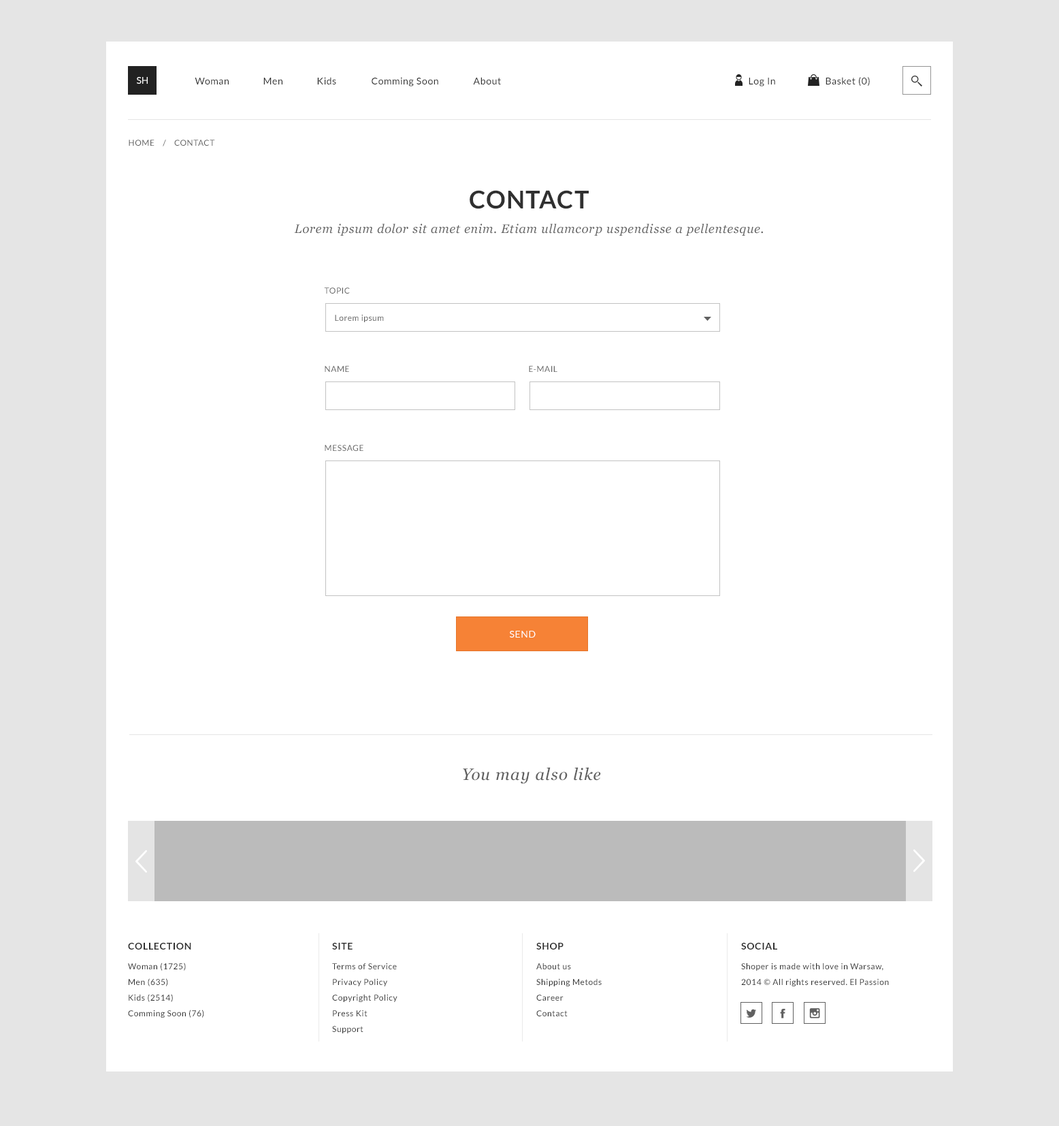
<style>
.page{position:relative;width:1059px;height:1126px;background:#ffffff}
.page>*{position:absolute;margin:0}
.t1{font:9.5px "Lato-Regular";color:#ffffff;text-transform:uppercase}
.t2{font:9.5px "Lato-Regular";letter-spacing:0.05em;color:#303030}
.t3{font:8.2px "Lato-Regular";letter-spacing:0.05em;color:#606060;text-transform:uppercase}
.t4{font:12.3px/24.5px "Georgia-Italic";letter-spacing:0.05em;color:#606060}
.t5{font:24.5px/24.5px "Lato-Bold";letter-spacing:0.05em;color:#303030;text-transform:uppercase}
.t6{font:8.2px "Lato-Regular";letter-spacing:0.05em;color:#606060}
.t7{font:9.5px "Lato-Regular";letter-spacing:0.05em;color:#ffffff;text-transform:uppercase}
.t8{font:16.3px "Georgia-Italic";letter-spacing:0.05em;color:#606060}
.t9{font:9.5px "Lato-Bold";letter-spacing:0.05em;color:#303030;text-transform:uppercase}
.t10{font:8.2px/15.7px "Lato-Regular";letter-spacing:0.05em;color:#303030}
</style>
<div class="page">
<p class="t1" style="left:137px;top:77px;width:11px;height:7px">sh</p>
<p class="t2" style="left:195px;top:78px;width:34px;height:6px">Woman</p>
<p class="t2" style="left:264px;top:78px;width:19px;height:6px">Men</p>
<p class="t2" style="left:317px;top:77px;width:19px;height:7px">Kids</p>
<p class="t2" style="left:372px;top:77px;width:66px;height:9px">Comming Soon</p>
<p class="t2" style="left:473px;top:77px;width:28px;height:7px">About</p>
<p class="t2" style="left:749px;top:78px;width:27px;height:8px">Log In</p>
<p class="t2" style="left:826px;top:77px;width:44px;height:9px">Basket (0)</p>
<p class="t3" style="left:129px;top:140px;width:86px;height:6px">HOME    /    contact</p>
<p class="t4" style="left:294px;top:190px;width:469px;height:46px;text-align:center"><span class="t5">contact<br></span>Lorem ipsum dolor sit amet enim. Etiam ullamcorp uspendisse a pellentesque.</p>
<p class="t3" style="left:324px;top:287px;width:26px;height:6px">Topic</p>
<p class="t6" style="left:335px;top:315px;width:49px;height:7px">Lorem ipsum</p>
<p class="t3" style="left:325px;top:366px;width:24px;height:6px">NAME</p>
<p class="t3" style="left:529px;top:366px;width:29px;height:6px">E-mail</p>
<p class="t3" style="left:325px;top:445px;width:39px;height:6px">Message</p>
<p class="t7" style="left:510px;top:631px;width:26px;height:6px">Send</p>
<p class="t8" style="left:463px;top:767px;width:138px;height:17px">You may also like</p>
<p class="t9" style="left:128px;top:942px;width:63px;height:7px">Collection</p>
<p class="t9" style="left:332px;top:942px;width:21px;height:7px">site</p>
<p class="t9" style="left:537px;top:942px;width:27px;height:7px">Shop</p>
<p class="t9" style="left:741px;top:942px;width:37px;height:7px">social</p>
<p class="t10" style="left:128px;top:962px;width:76px;height:55px">Woman (1725)<br>Men (635)<br>Kids (2514)<br>Comming Soon (76)</p>
<p class="t10" style="left:332px;top:963px;width:66px;height:70px">Terms of Service <br>Privacy Policy <br>Copyright Policy <br>Press Kit <br>Support</p>
<p class="t10" style="left:537px;top:963px;width:65px;height:53px">About us<br>Shipping Metods<br>Career<br>Contact</p>
<p class="t10" style="left:741px;top:963px;width:148px;height:23px">Shoper is made with love in Warsaw, <br>2014 © All rights reserved. El Passion</p>
</div>
